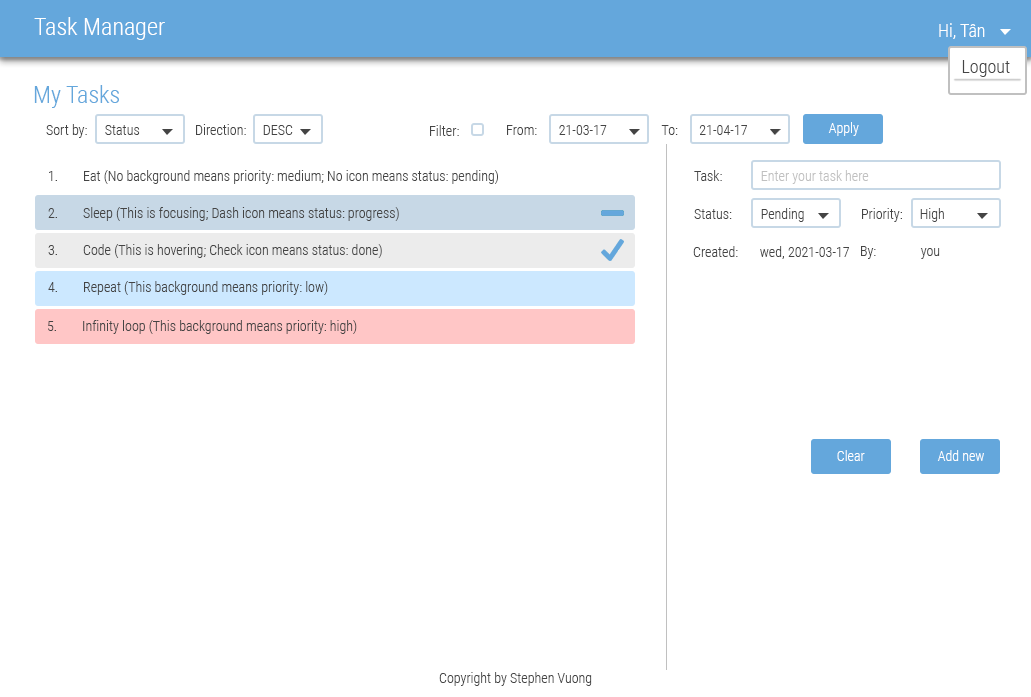
<style>
.page{position:relative;width:1031px;height:697px;background:#ffffff}
.page>*{position:absolute;margin:0}
.t1{font:24px "RobotoCondensed-Light";color:#ffffff}
.t2{font:18px "RobotoCondensed-Light";color:#ffffff}
.t3{font:18px "RobotoCondensed-Light";color:#444444}
.t4{font:24px "RobotoCondensed-Light";color:#64a7dc}
.t5{font:14px "RobotoCondensed-Light";color:#444444}
.t6{font:14px "RobotoCondensed-Light";color:#ffffff}
.t7{font:14px "RobotoCondensed-Light";color:#c0c0c0}
</style>
<div class="page">
<p class="t1" style="left:34px;top:17px;width:131px;height:23px">Task Manager</p>
<p class="t2" style="left:939px;top:23px;width:46px;height:16px">Hi, Tân</p>
<p class="t3" style="left:962px;top:60px;width:48px;height:17px">Logout</p>
<p class="t4" style="left:34px;top:85px;width:85px;height:23px">My Tasks</p>
<p class="t5" style="left:46px;top:124px;width:41px;height:14px">Sort by:</p>
<p class="t5" style="left:105px;top:125px;width:35px;height:10px">Status</p>
<p class="t5" style="left:196px;top:124px;width:50px;height:11px">Direction:</p>
<p class="t5" style="left:263px;top:125px;width:30px;height:10px">DESC</p>
<p class="t5" style="left:430px;top:125px;width:29px;height:11px">Filter:</p>
<p class="t5" style="left:507px;top:125px;width:30px;height:10px">From:</p>
<p class="t5" style="left:559px;top:125px;width:48px;height:10px">21-03-17</p>
<p class="t5" style="left:661px;top:125px;width:17px;height:10px">To:</p>
<p class="t5" style="left:699px;top:125px;width:48px;height:10px">21-04-17</p>
<p class="t6" style="left:828px;top:122px;width:31px;height:14px">Apply</p>
<p class="t5" style="left:49px;top:171px;width:8px;height:10px">1.</p>
<p class="t5" style="left:84px;top:170px;width:414px;height:14px">Eat (No background means priority: medium; No icon means status: pending)</p>
<p class="t5" style="left:694px;top:170px;width:28px;height:11px">Task:</p>
<p class="t7" style="left:761px;top:170px;width:108px;height:14px">Enter your task here</p>
<p class="t5" style="left:48px;top:208px;width:9px;height:10px">2.</p>
<p class="t5" style="left:83px;top:207px;width:316px;height:14px">Sleep (This is focusing; Dash icon means status: progress)</p>
<p class="t5" style="left:694px;top:209px;width:38px;height:10px">Status:</p>
<p class="t5" style="left:761px;top:208px;width:43px;height:14px">Pending</p>
<p class="t5" style="left:862px;top:208px;width:40px;height:14px">Priority:</p>
<p class="t5" style="left:920px;top:208px;width:24px;height:14px">High</p>
<p class="t5" style="left:48px;top:245px;width:9px;height:10px">3.</p>
<p class="t5" style="left:83px;top:244px;width:299px;height:14px">Code (This is hovering; Check icon means status: done)</p>
<p class="t5" style="left:693px;top:246px;width:45px;height:11px">Created:</p>
<p class="t5" style="left:760px;top:246px;width:89px;height:13px">wed, 2021-03-17</p>
<p class="t5" style="left:861px;top:246px;width:15px;height:13px">By:</p>
<p class="t5" style="left:920px;top:248px;width:20px;height:11px">you</p>
<p class="t5" style="left:84px;top:281px;width:244px;height:14px">Repeat (This background means priority: low)</p>
<p class="t5" style="left:48px;top:282px;width:9px;height:10px">4.</p>
<p class="t5" style="left:48px;top:321px;width:8px;height:10px">5.</p>
<p class="t5" style="left:83px;top:320px;width:274px;height:14px">Infinity loop (This background means priority: high)</p>
<p class="t6" style="left:837px;top:450px;width:28px;height:11px">Clear</p>
<p class="t6" style="left:937px;top:450px;width:47px;height:11px">Add new</p>
<p class="t5" style="left:439px;top:672px;width:153px;height:14px">Copyright by Stephen Vuong</p>
</div>
